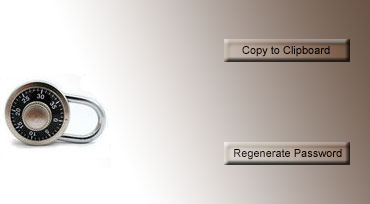
<style>
.page{position:relative;width:370px;height:204px}
.page>*{position:absolute;margin:0}
.t1{font:11px "ArialMT";color:#000000}
</style>
<div class="page">
<p class="t1" style="left:242px;top:46px;width:88px;height:11px">Copy to Clipboard</p>
<p class="t1" style="left:234px;top:149px;width:108px;height:11px">Regenerate Password</p>
</div>
